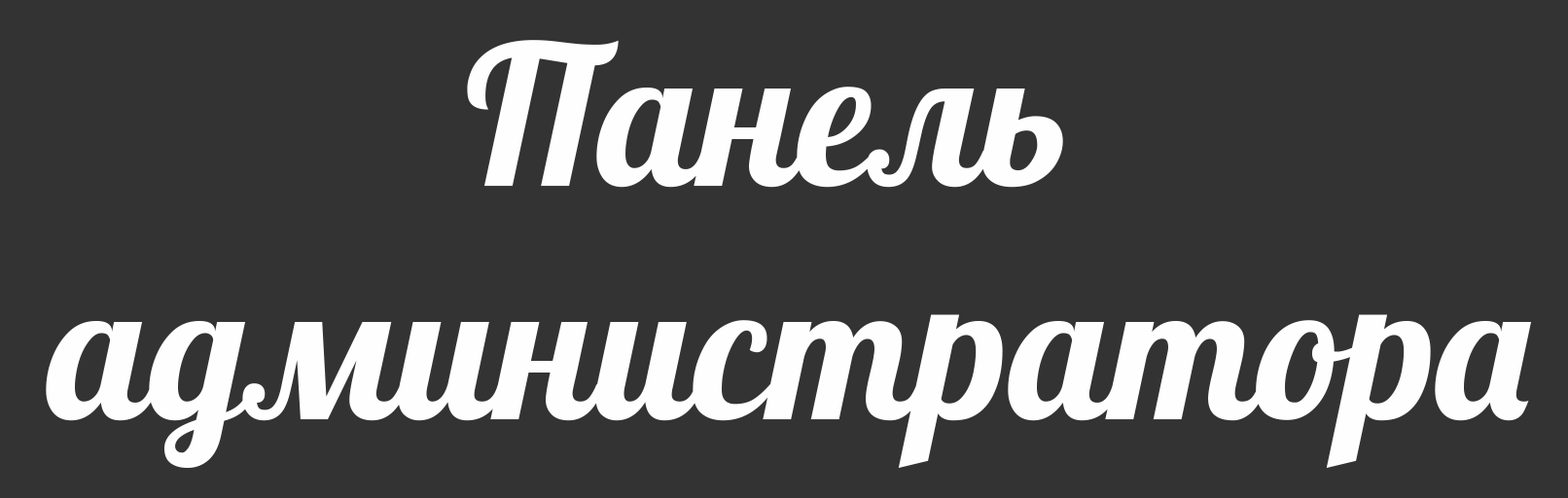
<style>
.page{position:relative;width:1568px;height:498px;background:#333333}
.page>*{position:absolute;margin:0}
.t1{font:194.5px "Lobster";color:#fefefe}
</style>
<div class="page">
<p class="t1" style="left:46px;top:40px;width:1485px;height:428px;text-align:center">Панель <br>администратора</p>
</div>
